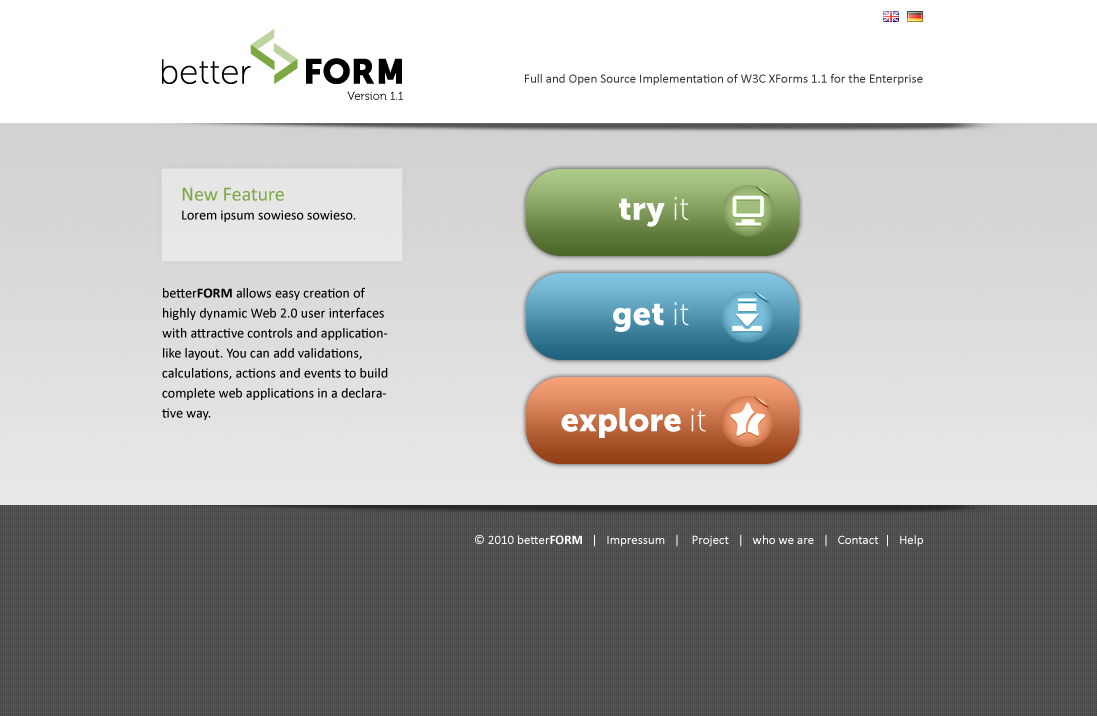
<style>
.page{position:relative;width:1097px;height:716px;background:#555555}
.page>*{position:absolute;margin:0}
.t1{font:13px "Calibri";color:#363636}
.t2{font:11.5px "Museo-300"}
.t3{font:20px "Calibri";color:#7ba841}
.t4{font:32.7px "MuseoSans-900";color:#ffffff}
.t5{font:32.7px "MuseoSans-100";color:#ffffff}
.t6{font:14px "Calibri";color:#000000}
.t7{font:14px/20px "Calibri";color:#000000}
.t8{font:14px/20px "Calibri-Bold";color:#000000}
.t9{font:13px "Calibri";color:#ffffff}
.t10{font:13px "Calibri-Bold";color:#ffffff}
</style>
<div class="page">
<p class="t1" style="left:525px;top:74px;width:398px;height:11px">Full and Open Source Implementation of W3C XForms 1.1 for the Enterprise</p>
<p class="t2" style="left:347px;top:91px;width:56px;height:9px">Version 1.1</p>
<p class="t3" style="left:182px;top:187px;width:102px;height:14px">New Feature</p>
<p class="t4" style="left:619px;top:197px;width:70px;height:30px">try <span class="t5">it</span></p>
<p class="t6" style="left:182px;top:210px;width:174px;height:12px">Lorem ipsum sowieso sowieso.</p>
<p class="t7" style="left:162px;top:287px;width:226px;height:133px">better<span class="t8">FORM</span> allows easy creation of highly dynamic Web 2.0 user interfaces with attractive controls and application-like layout. You can add validations, <br>calculations, actions and events to build complete web applications in a declarative way.</p>
<p class="t4" style="left:613px;top:302px;width:76px;height:30px">get <span class="t5">it</span></p>
<p class="t4" style="left:561px;top:408px;width:145px;height:30px">explore <span class="t5">it</span></p>
<p class="t9" style="left:475px;top:535px;width:448px;height:12px">© 2010 better<span class="t10">FORM</span>   |   Impressum   |    Project   |   who we are   |   Contact  |   Help</p>
</div>
